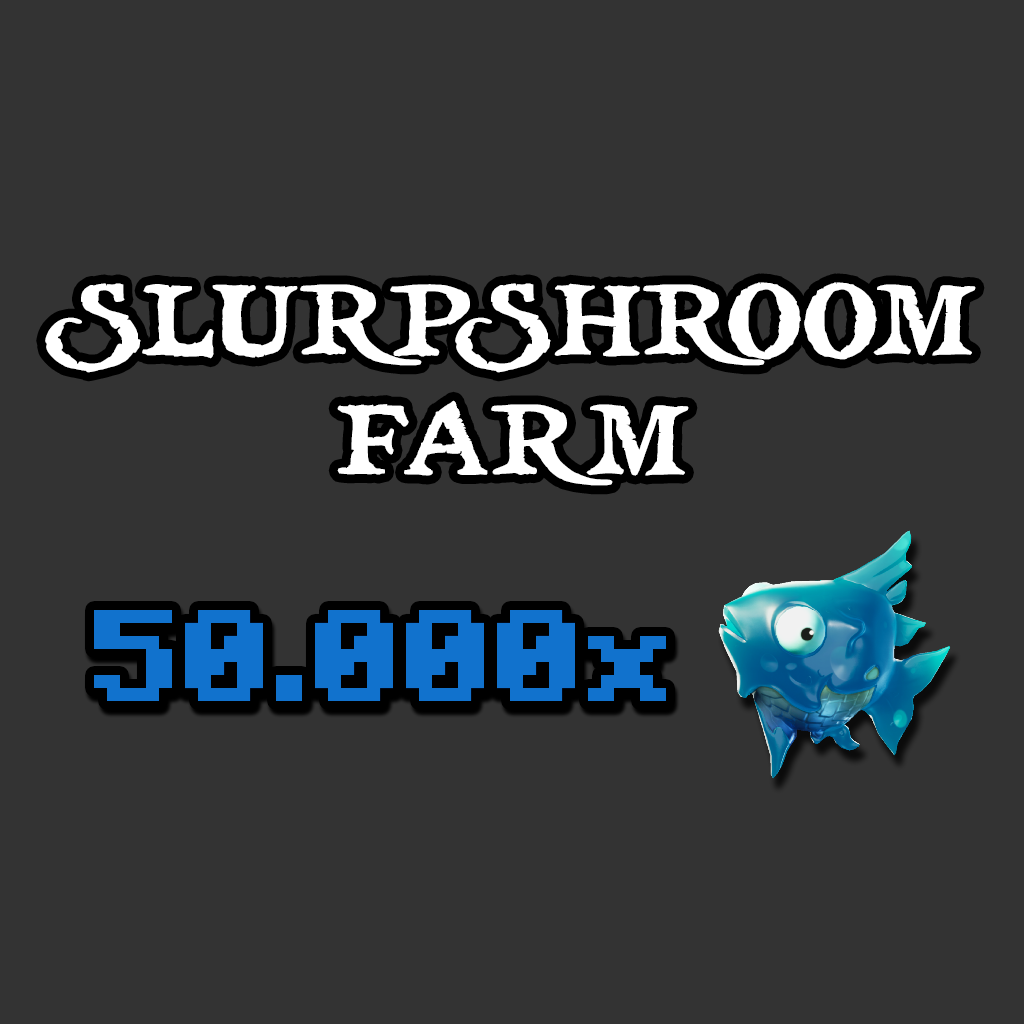
<style>
.page{position:relative;width:1024px;height:1024px;background:#333333}
.page>*{position:absolute;margin:0}
.t1{font:99.9px "treasuremap";color:#ffffff}
.t2{font:130px "Minecraft-Bold";color:#1172cd}
</style>
<div class="page">
<p class="t1" style="left:45px;top:282px;width:931px;height:204px;text-align:center">SLURPSHROOM<br>FARM</p>
<p class="t2" style="left:94px;top:610px;width:572px;height:91px">50.000x</p>
</div>
